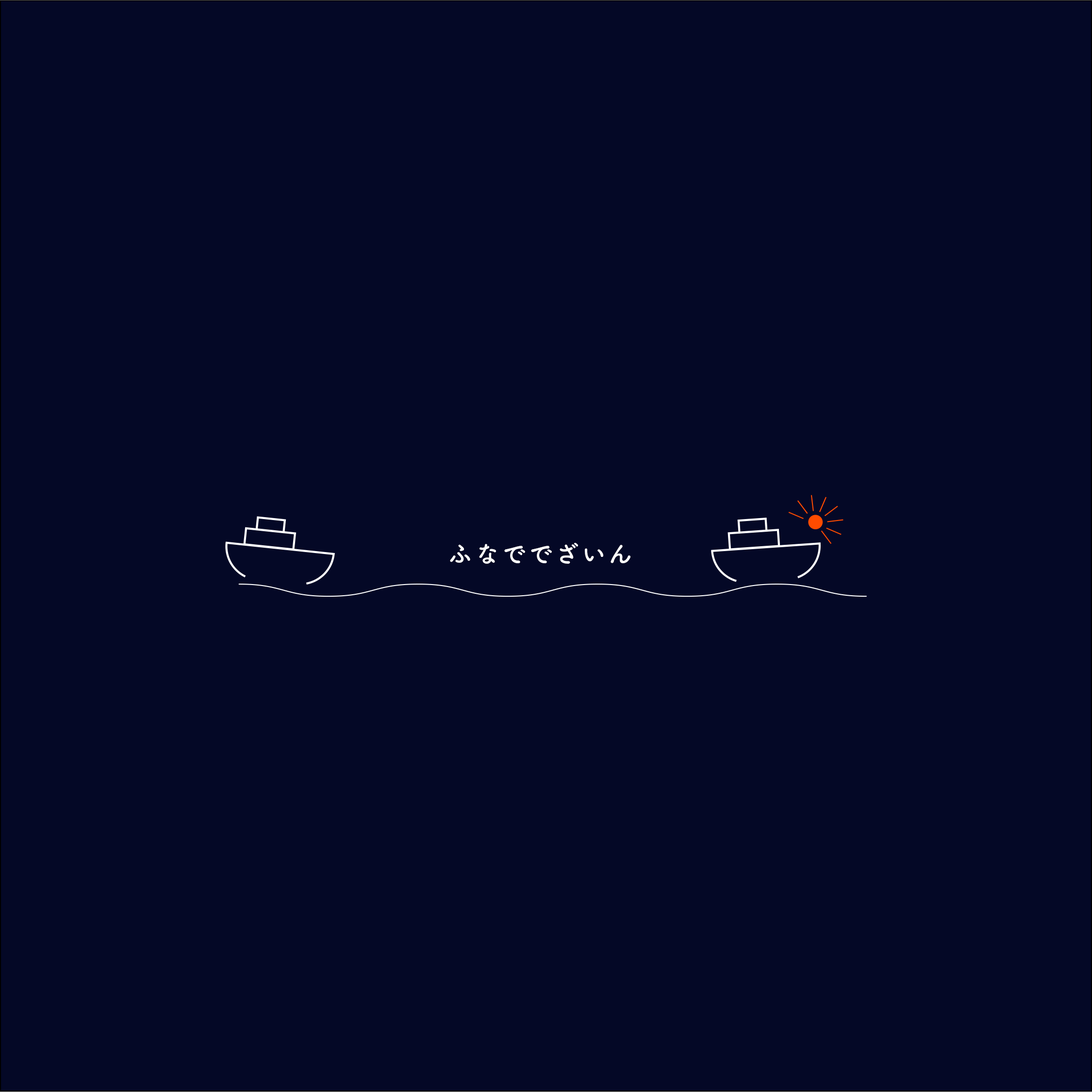
<style>
.page{position:relative;width:1092px;height:1092px;background:#040826}
.page>*{position:absolute;margin:0}
.t1{font:24.3px "TsukuARdGothicStd-B";letter-spacing:0.1em;color:#ffffff}
</style>
<div class="page">
<p class="t1" style="left:450px;top:543px;width:180px;height:21px">ふなででざいん</p>
</div>
